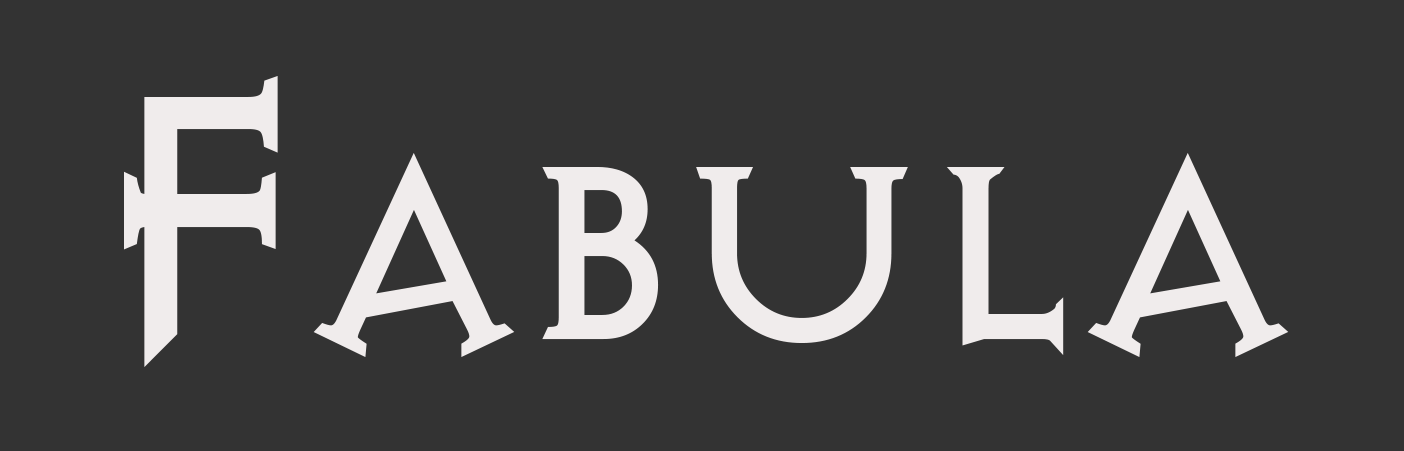
<style>
.page{position:relative;width:1404px;height:451px;background:#333333}
.page>*{position:absolute;margin:0}
.t1{font:400px "AvQest";color:#f0ecec}
</style>
<div class="page">
<p class="t1" style="left:124px;top:76px;width:1165px;height:291px">Fabula</p>
</div>
